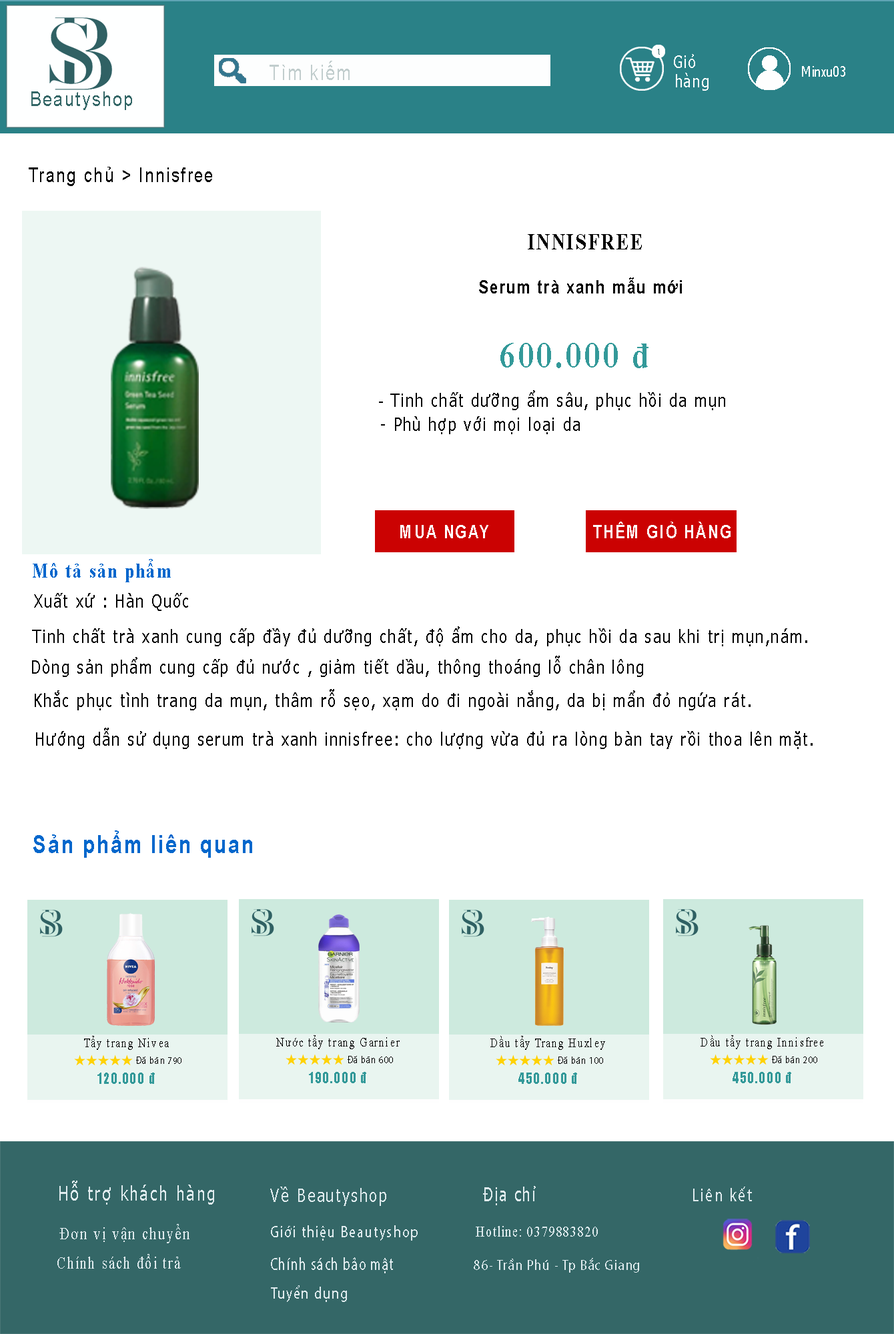
<style>
.page{position:relative;width:894px;height:1334px;background:#ffffff}
.page>*{position:absolute;margin:0}
.t1{font:8.3px "Tahoma";letter-spacing:0.1em;color:#336666;scale:0.83 1}
.t2{font:21.1px "ArialMT";letter-spacing:0.1em;color:#c1cdcd;scale:0.8 1}
.t3{font:17.6px "Tahoma";letter-spacing:0.1em;color:#ffffff;scale:0.8 1}
.t4{font:17.1px "Tahoma";letter-spacing:0.1em;color:#ffffff;scale:0.8 1}
.t5{font:13.9px "Tahoma";color:#ffffff;scale:0.8 1}
.t6{font:20.7px "ArialMT";letter-spacing:0.1em;color:#336666;scale:0.8 1}
.t7{font:19.7px "ArialMT";letter-spacing:0.1em;color:#000000;scale:0.8 1}
.t8{font:22.8px "TimesNewRomanPS-BoldMT";letter-spacing:0.1em;color:#000000;scale:0.8 1}
.t9{font:18.2px "Arial-BoldMT";letter-spacing:0.1em;color:#000000;scale:0.8 1}
.t10{font:36.6px "TimesNewRomanPS-BoldMT";letter-spacing:0.1em;color:#339999;scale:0.83 1}
.t11{font:18.2px "Tahoma";letter-spacing:0.1em;color:#000000;scale:0.8 1}
.t12{font:18.2px "ArialMT";letter-spacing:0.1em;color:#000000;scale:0.8 1}
.t13{font:18.2px "Arial-BoldMT";letter-spacing:0.1em;color:#ffffff;scale:0.8 1}
.t14{font:20.5px "TimesNewRomanPS-BoldMT";letter-spacing:0.1em;color:#0066cc;scale:0.8 1}
.t15{font:24.6px "Arial-BoldMT";letter-spacing:0.1em;color:#0167cc;scale:0.8 1}
.t16{font:13.1px "TimesNewRomanPSMT";letter-spacing:0.1em;color:#000000;scale:0.8 1}
.t17{font:10px "MyriadPro-Regular";letter-spacing:0.1em;color:#000000;scale:0.8 1}
.t18{font:14.8px "Impact";letter-spacing:0.1em;color:#339999;scale:0.8 1}
.t19{font:19.7px "Tahoma";letter-spacing:0.1em;color:#dfebee;scale:0.8 1}
.t20{font:18.6px "Tahoma";letter-spacing:0.1em;color:#dfebee;scale:0.8 1}
.t21{font:19.6px "Tahoma";letter-spacing:0.1em;color:#dfebee;scale:0.73 1}
.t22{font:18.4px "MyriadPro-Regular";letter-spacing:0.1em;color:#dfebee;scale:0.81 1}
.t23{font:17.4px "TimesNewRomanPSMT";letter-spacing:0.1em;color:#dfebee;scale:0.8 1}
.t24{font:16.2px "MyriadPro-Regular";letter-spacing:0.1em;color:#dfebee;scale:0.8 1}
.t25{font:14.8px "TimesNewRomanPSMT";letter-spacing:0.1em;color:#dfebee;scale:0.8 1}
.t26{font:16.9px "TimesNewRomanPSMT";letter-spacing:0.1em;color:#dfebee;scale:0.8 1}
.t27{font:17.5px "MyriadPro-Regular";letter-spacing:0.1em;color:#dfebee;scale:0.7 1}
.t28{font:14.8px "MyriadPro-Regular";letter-spacing:0.1em;color:#dfebee;scale:0.8 1}
.t29{font:16.3px "MyriadPro-Regular";letter-spacing:0.1em;color:#dfebee;scale:0.8 1}
</style>
<div class="page">
<p class="t1" style="left:658px;top:49px;width:2px;height:6px">1</p>
<p class="t2" style="left:269px;top:61px;width:81px;height:19px">Tìm kiếm</p>
<p class="t3" style="left:674px;top:54px;width:21px;height:14px">Giỏ</p>
<p class="t4" style="left:676px;top:73px;width:32px;height:18px">hàng</p>
<p class="t5" style="left:802px;top:66px;width:43px;height:11px">Minxu03</p>
<p class="t6" style="left:31px;top:91px;width:101px;height:19px">Beautyshop</p>
<p class="t7" style="left:29px;top:167px;width:183px;height:19px">Trang chủ &gt; Innisfree</p>
<p class="t8" style="left:528px;top:234px;width:114px;height:15px">INNISFREE</p>
<p class="t9" style="left:479px;top:277px;width:203px;height:16px">Serum trà xanh mẫu mới</p>
<p class="t10" style="left:500px;top:343px;width:148px;height:25px">600.000 đ</p>
<p class="t11" style="left:379px;top:390px;width:346px;height:20px"><span class="t12">- </span>Tinh chất dưỡng ẩm sâu, phục hồi da mụn</p>
<p class="t11" style="left:381px;top:416px;width:199px;height:18px">- Phù hợp với mọi loại da</p>
<p class="t13" style="left:593px;top:522px;width:137px;height:16px">THÊM GIỎ HÀNG</p>
<p class="t13" style="left:400px;top:525px;width:88px;height:13px">MUA NGAY</p>
<p class="t14" style="left:33px;top:559px;width:138px;height:23px">Mô tả sản phẩm</p>
<p class="t11" style="left:34px;top:593px;width:154px;height:18px">Xuất xứ : Hàn Quốc</p>
<p class="t11" style="left:32px;top:626px;width:775px;height:20px">Tinh chất trà xanh cung cấp đầy đủ dưỡng chất, độ ẩm cho da, phục hồi da sau khi trị mụn,nám.</p>
<p class="t11" style="left:32px;top:656px;width:611px;height:21px">Dòng sản phẩm cung cấp đủ nước , giảm tiết dầu, thông thoáng lỗ chân lông</p>
<p class="t11" style="left:35px;top:689px;width:715px;height:21px">Khắc phục tình trang da mụn, thâm rỗ sẹo, xạm do đi ngoài nắng, da bị mẩn đỏ ngứa rát.</p>
<p class="t11" style="left:36px;top:728px;width:776px;height:21px">Hướng dẫn sử dụng serum trà xanh innisfree: cho lượng vừa đủ ra lòng bàn tay rồi thoa lên mặt.</p>
<p class="t15" style="left:33px;top:830px;width:219px;height:28px">Sản phẩm liên quan</p>
<p class="t16" style="left:84px;top:1036px;width:85px;height:14px">Tẩy trang Nivea</p>
<p class="t16" style="left:276px;top:1035px;width:124px;height:14px">Nước tẩy trang Garnier</p>
<p class="t16" style="left:490px;top:1036px;width:115px;height:14px">Dầu tẩy Trang Huxley</p>
<p class="t16" style="left:700px;top:1035px;width:123px;height:14px">Dầu tẩy trang Innisfree</p>
<p class="t17" style="left:136px;top:1057px;width:45px;height:7px">Đã bán 900</p>
<p class="t17" style="left:136px;top:1057px;width:45px;height:7px">Đã bán 790</p>
<p class="t17" style="left:348px;top:1056px;width:45px;height:7px">Đã bán 900</p>
<p class="t17" style="left:348px;top:1056px;width:45px;height:7px">Đã bán 600</p>
<p class="t17" style="left:558px;top:1057px;width:45px;height:7px">Đã bán 900</p>
<p class="t17" style="left:558px;top:1057px;width:45px;height:7px">Đã bán 100</p>
<p class="t17" style="left:772px;top:1056px;width:45px;height:7px">Đã bán 900</p>
<p class="t17" style="left:772px;top:1056px;width:45px;height:7px">Đã bán 200</p>
<p class="t18" style="left:97px;top:1073px;width:58px;height:11px">120.000 đ</p>
<p class="t18" style="left:309px;top:1072px;width:57px;height:11px">190.000 đ</p>
<p class="t18" style="left:518px;top:1073px;width:59px;height:11px">450.000 đ</p>
<p class="t18" style="left:732px;top:1072px;width:59px;height:11px">450.000 đ</p>
<p class="t19" style="left:59px;top:1181px;width:155px;height:24px">Hỗ trợ khách hàng</p>
<p class="t20" style="left:270px;top:1187px;width:116px;height:19px">Về Beautyshop</p>
<p class="t21" style="left:483px;top:1186px;width:53px;height:19px">Địa chỉ</p>
<p class="t22" style="left:693px;top:1187px;width:59px;height:14px">Liên kết</p>
<p class="t23" style="left:59px;top:1224px;width:130px;height:19px">Đơn vị vận chuyển</p>
<p class="t24" style="left:271px;top:1225px;width:147px;height:16px">Giới thiệu Beautyshop</p>
<p class="t25" style="left:476px;top:1226px;width:122px;height:11px">Hotline: 0379883820</p>
<p class="t26" style="left:57px;top:1254px;width:124px;height:15px">Chính sách đổi trả</p>
<p class="t27" style="left:271px;top:1257px;width:122px;height:16px">Chính sách bảo mật</p>
<p class="t28" style="left:474px;top:1258px;width:165px;height:15px">86- Trần Phú - Tp Bắc Giang</p>
<p class="t29" style="left:271px;top:1285px;width:76px;height:17px">Tuyển dụng</p>
</div>
